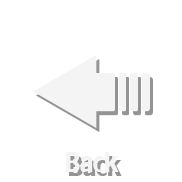
<style>
.page{position:relative;width:182px;height:182px;background:#ffffff}
.page>*{position:absolute;margin:0}
.t1{font:28.2px "CommunistSansBold";letter-spacing:-0.08em;color:#f4f4f4;scale:0.89 1}
</style>
<div class="page">
<p class="t1" style="left:66px;top:152px;width:53px;height:20px">Back</p>
</div>
